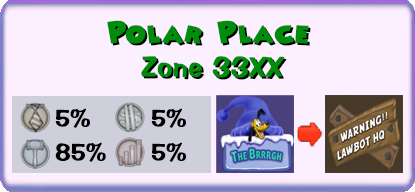
<style>
.page{position:relative;width:415px;height:192px;background:#fcefff}
.page>*{position:absolute;margin:0}
.t1{font:28px "Minnie";color:#008d0c;font-weight:bold}
.t2{font:28px "Minnie";font-weight:bold}
.t3{font:28px "ImpressBT-Regular";color:#008d0c;font-weight:bold}
.t4{font:28px "ImpressBT-Regular";font-weight:bold}
.t5{font:23.6px "ImpressBT-Regular";color:#000000;font-weight:bold}
</style>
<div class="page">
<p class="t1" style="left:107px;top:20px;width:202px;height:24px">Polar Place</p>
<p class="t2" style="left:109px;top:22px;width:202px;height:24px">Polar Place</p>
<p class="t3" style="left:141px;top:56px;width:144px;height:22px">Zone 33XX</p>
<p class="t4" style="left:143px;top:58px;width:144px;height:22px">Zone 33XX</p>
<p class="t5" style="left:55px;top:108px;width:35px;height:20px">5%</p>
<p class="t5" style="left:151px;top:108px;width:35px;height:20px">5%</p>
<p class="t5" style="left:55px;top:142px;width:51px;height:20px">85%</p>
<p class="t5" style="left:151px;top:142px;width:35px;height:20px">5%</p>
</div>
